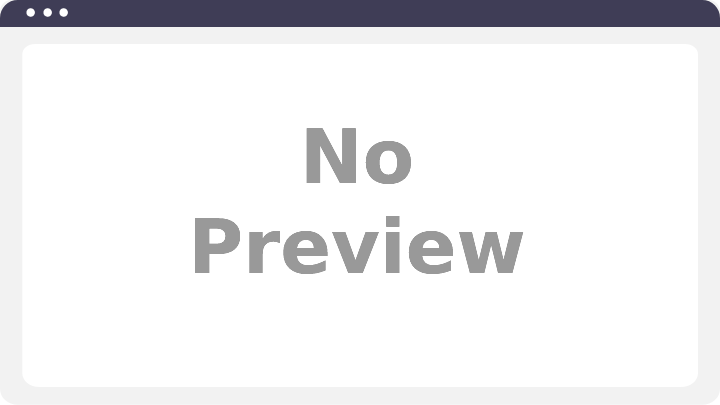
<style>
.page{position:relative;width:720px;height:405px;background:#ffffff}
.page>*{position:absolute;margin:0}
.t1{font:75px "DejaVuSans-Bold";color:#999999}
</style>
<div class="page">
<p class="t1" style="left:195px;top:128px;width:329px;height:147px;text-align:center">No<br>Preview</p>
</div>
